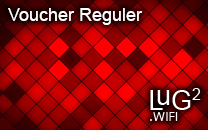
<style>
.page{position:relative;width:208px;height:130px}
.page>*{position:absolute;margin:0}
.t1{font:18px "ArialMT";color:#ffffff}
</style>
<div class="page">
<p class="t1" style="left:8px;top:8px;width:135px;height:17px">Voucher Reguler</p>
</div>
